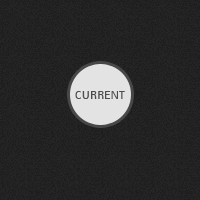
<style>
.page{position:relative;width:200px;height:200px;background:#242424}
.page>*{position:absolute;margin:0}
.t1{font:10px "Nobile";letter-spacing:0.05em;color:#4c4c4c;font-variant:small-caps}
</style>
<div class="page">
<p class="t1" style="left:75px;top:91px;width:50px;height:8px">CURRENT</p>
</div>
